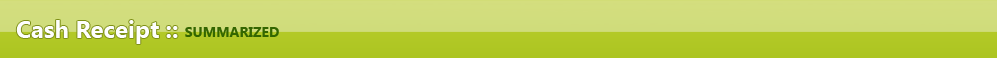
<style>
.page{position:relative;width:997px;height:58px}
.page>*{position:absolute;margin:0}
.t1{font:24px "SegoeUI-Bold";color:#fefefe}
.t2{font:14px "SegoeUI-Bold";color:#336600}
</style>
<div class="page">
<p class="t1" style="left:16px;top:20px;width:162px;height:24px">Cash Receipt ::</p>
<p class="t2" style="left:185px;top:27px;width:94px;height:10px">SUMMARIZED</p>
</div>
